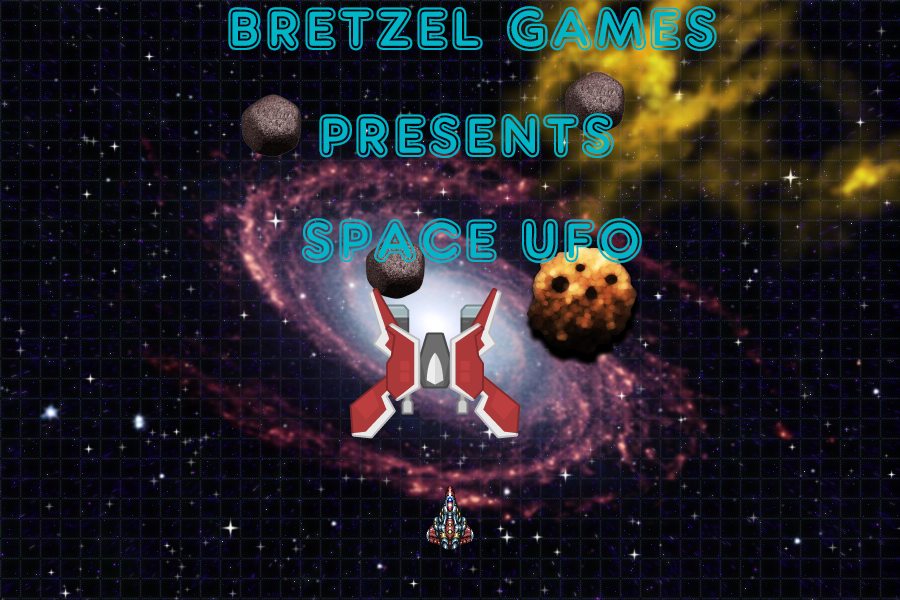
<style>
.page{position:relative;width:900px;height:600px}
.page>*{position:absolute;margin:0}
.t1{font:64px "ARDELANEY";color:#00b5c8}
</style>
<div class="page">
<p class="t1" style="left:228px;top:6px;width:489px;height:45px">BRETZEL GAMES</p>
<p class="t1" style="left:319px;top:113px;width:295px;height:45px">PRESENTS</p>
<p class="t1" style="left:302px;top:218px;width:340px;height:45px">SPACE UFO</p>
</div>
